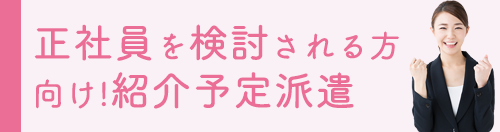
<style>
.page{position:relative;width:500px;height:132px;background:#faf1f7}
.page>*{position:absolute;margin:0}
.t1{font:32px "TsukuBRdGothic-Regular";color:#eb6e96;font-weight:bold}
.t2{font:40px "TsukuBRdGothic-Regular";color:#eb6e96;font-weight:bold}
</style>
<div class="page">
<p class="t1" style="left:34px;top:24px;width:365px;height:85px"><span class="t2">正社員</span>を<span class="t2">検討</span>される方<br>向け!<span class="t2">紹介予定派遣</span></p>
</div>
